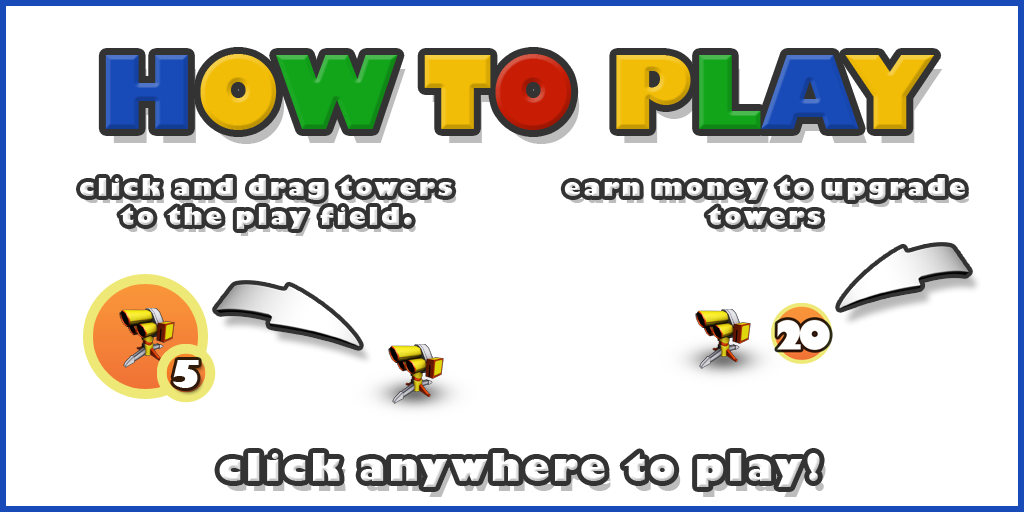
<style>
.page{position:relative;width:1024px;height:512px;background:#ffffff}
.page>*{position:absolute;margin:0}
.t1{font:99.3px "GillSans-UltraBold";color:#184bb8}
.t2{font:99.3px "GillSans-UltraBold";color:#f2bd06}
.t3{font:99.3px "GillSans-UltraBold";color:#12a51a}
.t4{font:99.3px "GillSans-UltraBold";color:#c81c04}
.t5{font:24.4px "GillSans-UltraBold";letter-spacing:0.1em;color:#ffffff}
.t6{font:36.6px "GillSans-UltraBold";letter-spacing:0.1em;color:#ffffff}
</style>
<div class="page">
<p class="t1" style="left:105px;top:54px;width:830px;height:76px">H<span class="t2">O</span><span class="t3">W </span><span class="t2">T</span><span class="t4">O </span><span class="t2">P</span><span class="t3">L</span>A<span class="t2">Y</span></p>
<p class="t5" style="left:80px;top:178px;width:373px;height:51px;text-align:center">click and drag towers<br>to the play field.</p>
<p class="t6" style="left:219px;top:453px;width:601px;height:34px">click anywhere to play!</p>
</div>
